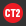
<style>
.page{position:relative;width:26px;height:26px;background:#ed1c24}
.page>*{position:absolute;margin:0}
.t1{font:10px "HelveticaLTStd-BoldCond";color:#ffffff;text-transform:uppercase}
</style>
<div class="page">
<p class="t1" style="left:5px;top:9px;width:15px;height:8px">ct2</p>
</div>
